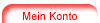
<style>
.page{position:relative;width:100px;height:23px;background:#ffffff}
.page>*{position:absolute;margin:0}
.t1{font:11px "ArialMT";color:#fe0202}
</style>
<div class="page">
<p class="t1" style="left:23px;top:12px;width:54px;height:8px">Mein Konto</p>
</div>
